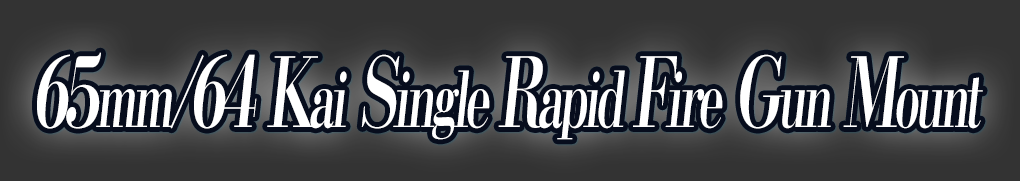
<style>
.page{position:relative;width:1020px;height:181px;background:#333333}
.page>*{position:absolute;margin:0}
.t1{font:96px "KochoStd-Heavy";letter-spacing:-0.08em;color:#ffffff;font-style:italic;scale:0.61 1}
.t2{font:76.8px "KochoStd-Heavy";letter-spacing:-0.08em;color:#ffffff;font-style:italic;scale:0.61 1}
</style>
<div class="page">
<p class="t1" style="left:37px;top:52px;width:946px;height:88px">65<span class="t2">mm</span>/64 K<span class="t2">ai</span> S<span class="t2">ingle </span>R<span class="t2">apid </span>F<span class="t2">ire</span> G<span class="t2">un</span> M<span class="t2">ount</span></p>
</div>
